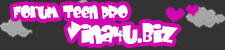
<style>
.page{position:relative;width:225px;height:50px;background:#333333}
.page>*{position:absolute;margin:0}
.t1{font:15.5px "BabyKruffy";color:#ffffff}
.t2{font:22.6px "BabyKruffy";color:#ffffff}
</style>
<div class="page">
<p class="t1" style="left:13px;top:5px;width:115px;height:14px">Forum Teen PRo</p>
<p class="t2" style="left:67px;top:21px;width:111px;height:23px">Vina4u.Biz</p>
</div>
